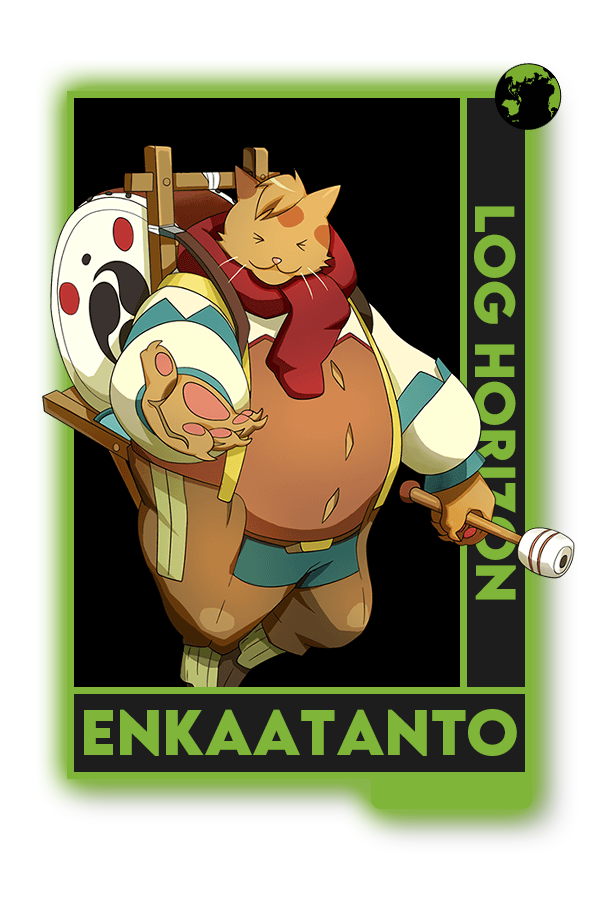
<style>
.page{position:relative;width:600px;height:900px;background:#ffffff}
.page>*{position:absolute;margin:0}
.t1{font:50px "LEMONMILK-Bold";color:#7fad41}
.t2{font:56.7px "LEMONMILK-Bold";color:#7fad41}
</style>
<div class="page">
<p class="t1" style="left:474px;top:206px;width:43px;height:394px;rotate:90deg">Log Horizon</p>
<p class="t2" style="left:84px;top:709px;width:433px;height:47px">Enkaatanto</p>
</div>
